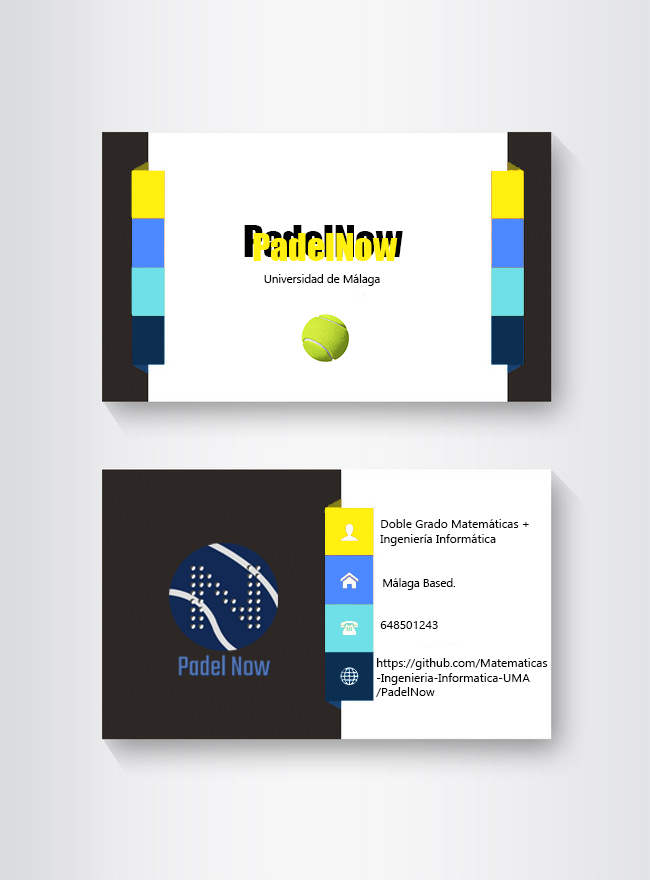
<style>
.page{position:relative;width:650px;height:880px;background:#ffffff}
.page>*{position:absolute;margin:0}
.t1{font:39.5px "Impact"}
.t2{font:36px "Impact";color:#fff010}
.t3{font:11.5px "Ebrima";color:#000000}
.t4{font:12px "Ebrima";color:#000000}
</style>
<div class="page">
<p class="t1" style="left:244px;top:225px;width:159px;height:32px">PadelNow</p>
<p class="t2" style="left:253px;top:233px;width:145px;height:28px">PadelNow</p>
<p class="t3" style="left:264px;top:274px;width:116px;height:12px">Universidad de Málaga</p>
<p class="t4" style="left:380px;top:519px;width:149px;height:27px">Doble Grado Matemáticas + <br>Ingeniería Informática</p>
<p class="t3" style="left:383px;top:578px;width:72px;height:12px">Málaga Based.</p>
<p class="t4" style="left:380px;top:621px;width:58px;height:8px">648501243</p>
<p class="t4" style="left:376px;top:658px;width:172px;height:39px">https://github.com/Matematicas<br>-Ingenieria-Informatica-UMA<br>/PadelNow</p>
</div>
